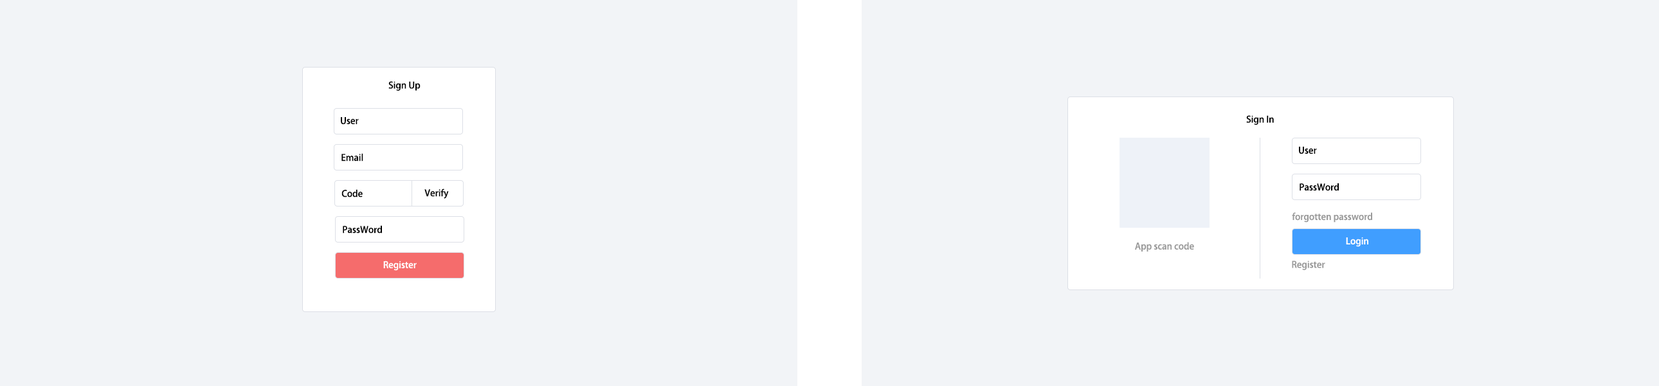
<style>
.page{position:relative;width:1659px;height:386px;background:#f2f4f7}
.page>*{position:absolute;margin:0}
.t1{font:9px "AdobeHeitiStd-Regular";color:#000000}
.t2{font:9px "AdobeHeitiStd-Regular";color:#999999}
.t3{font:9px "AdobeHeitiStd-Regular";color:#ffffff}
</style>
<div class="page">
<p class="t1" style="left:388px;top:81px;width:32px;height:10px">Sign Up</p>
<p class="t1" style="left:341px;top:117px;width:18px;height:7px">User</p>
<p class="t1" style="left:1246px;top:115px;width:28px;height:10px">Sign In</p>
<p class="t1" style="left:1299px;top:147px;width:18px;height:7px">User</p>
<p class="t1" style="left:341px;top:153px;width:22px;height:8px">Email</p>
<p class="t1" style="left:1299px;top:183px;width:39px;height:8px">PassWord</p>
<p class="t1" style="left:341px;top:189px;width:22px;height:8px">Code</p>
<p class="t1" style="left:424px;top:188px;width:25px;height:11px">Verify</p>
<p class="t2" style="left:1292px;top:212px;width:80px;height:10px">forgotten password</p>
<p class="t1" style="left:343px;top:225px;width:39px;height:8px">PassWord</p>
<p class="t2" style="left:1135px;top:242px;width:59px;height:9px">App scan code</p>
<p class="t3" style="left:1346px;top:237px;width:22px;height:10px">Login</p>
<p class="t3" style="left:383px;top:260px;width:34px;height:11px">Register</p>
<p class="t2" style="left:1292px;top:260px;width:33px;height:10px">Register</p>
</div>
